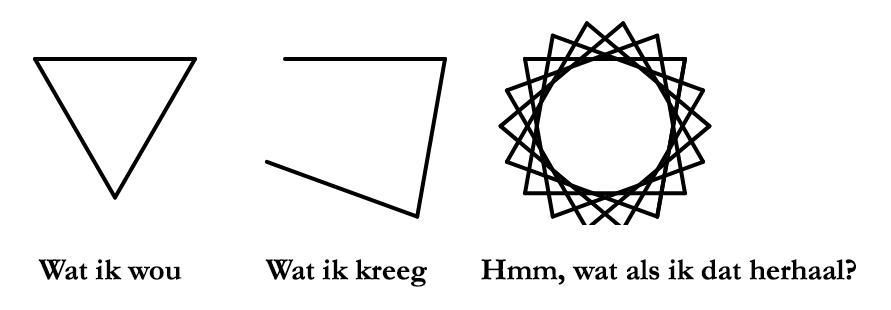
<style>
.page{position:relative;width:891px;height:310px;background:#ffffff}
.page>*{position:absolute;margin:0}
.t1{font:29.9px "Garamond-Bold";letter-spacing:-0.02em;color:#000000;font-weight:bold}
</style>
<div class="page">
<p class="t1" style="left:38px;top:259px;width:818px;height:28px">Wat ik wou           Wat ik kreeg       Hmm, wat als ik dat herhaal?</p>
</div>
